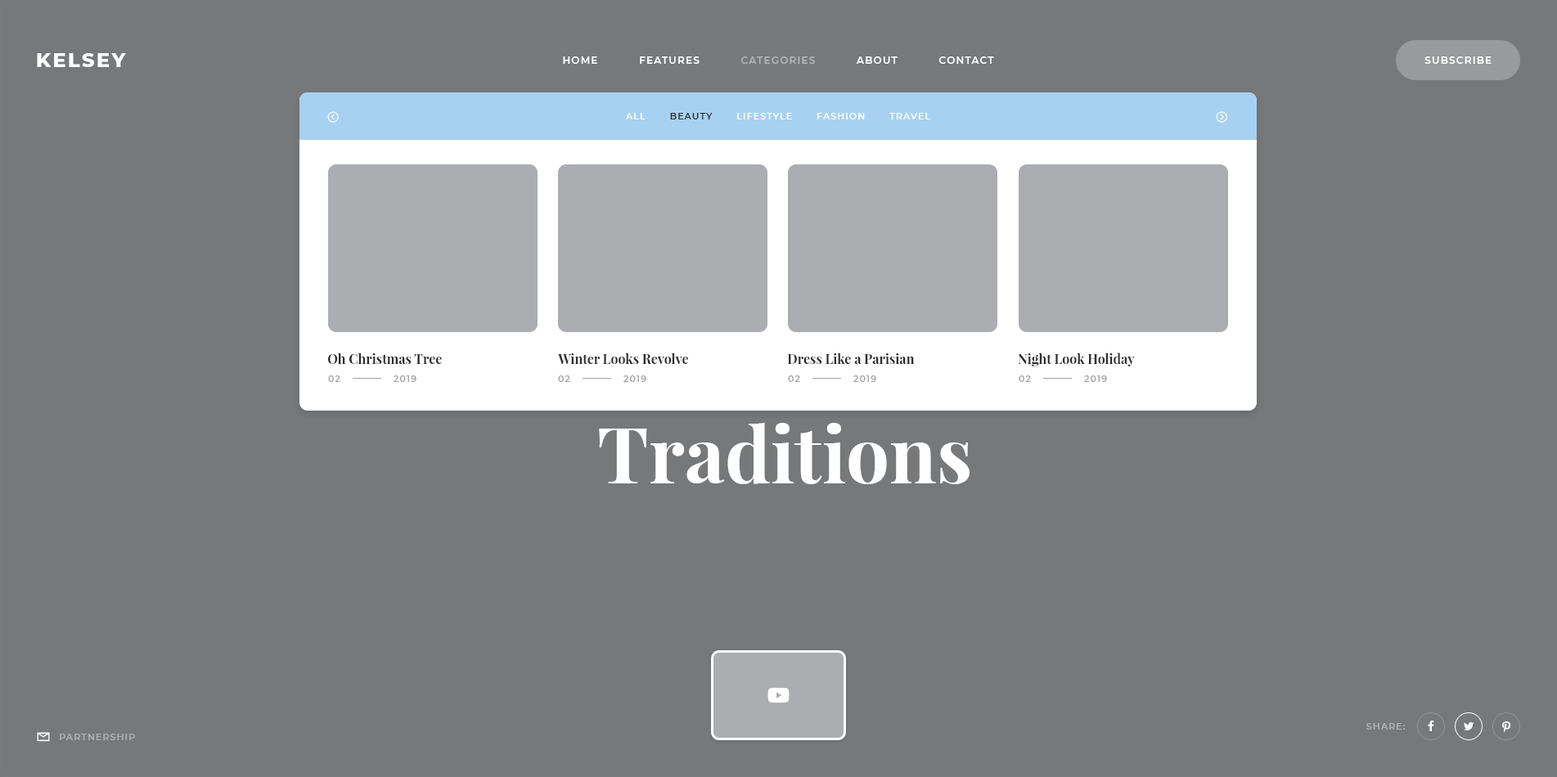
<style>
.page{position:relative;width:1557px;height:777px;background:#76787a}
.page>*{position:absolute;margin:0}
.t1{font:19.6px "Montserrat-ExtraBold";letter-spacing:0.1em;color:#ffffff;text-transform:uppercase}
.t2{font:9.8px "Montserrat-SemiBold";letter-spacing:0.1em;color:#fefefe;text-transform:uppercase}
.t3{font:9.8px "Montserrat-SemiBold";letter-spacing:0.1em;color:#b3b3b3;text-transform:uppercase}
.t4{font:9.8px "Montserrat-SemiBold";letter-spacing:0.1em;color:#ffffff;text-transform:uppercase}
.t5{font:9px "Montserrat-SemiBold";letter-spacing:0.1em;color:#ffffff;text-transform:uppercase}
.t6{font:9px "Montserrat-SemiBold";letter-spacing:0.1em;color:#2b2d2e;text-transform:uppercase}
.t7{font:76.9px/96.5px "PlayfairDisplay-Bold";color:#ffffff}
.t8{font:13.1px "PlayfairDisplay-Bold";color:#2b2d2e}
.t9{font:9px "Montserrat-SemiBold";letter-spacing:0.1em;color:#9fa1a4;text-transform:uppercase}
.t10{font:9px "Montserrat-SemiBold";letter-spacing:0.1em;color:#b0b1b2;text-transform:uppercase}
</style>
<div class="page">
<p class="t1" style="left:37px;top:53px;width:89px;height:14px">Kelsey</p>
<p class="t2" style="left:563px;top:56px;width:431px;height:8px">Home           Features           <span class="t3">Categories</span>           About           Contact</p>
<p class="t4" style="left:1424px;top:56px;width:68px;height:8px">Subscribe</p>
<p class="t5" style="left:625px;top:113px;width:306px;height:6px">All       <span class="t6">Beauty</span>       Lifestyle       Fashion       Travel</p>
<p class="t7" style="left:522px;top:326px;width:531px;height:158px;text-align:center">Holiday Family<br>Traditions</p>
<p class="t8" style="left:327px;top:353px;width:115px;height:11px">Oh Christmas Tree</p>
<p class="t8" style="left:558px;top:353px;width:130px;height:11px">Winter Looks Revolve</p>
<p class="t8" style="left:787px;top:353px;width:128px;height:11px">Dress Like a Parisian</p>
<p class="t8" style="left:1018px;top:353px;width:117px;height:14px">Night Look Holiday</p>
<p class="t9" style="left:328px;top:376px;width:12px;height:6px">02</p>
<p class="t9" style="left:394px;top:376px;width:22px;height:6px">2019</p>
<p class="t9" style="left:558px;top:376px;width:12px;height:6px">02</p>
<p class="t9" style="left:623px;top:376px;width:23px;height:6px">2019</p>
<p class="t9" style="left:788px;top:376px;width:12px;height:6px">02</p>
<p class="t9" style="left:853px;top:376px;width:23px;height:6px">2019</p>
<p class="t9" style="left:1019px;top:376px;width:12px;height:6px">02</p>
<p class="t9" style="left:1084px;top:376px;width:23px;height:6px">2019</p>
<p class="t10" style="left:1366px;top:723px;width:39px;height:7px">Share:</p>
<p class="t10" style="left:60px;top:734px;width:75px;height:6px">Partnership</p>
</div>
